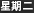
<style>
.page{position:relative;width:34px;height:13px}
.page>*{position:absolute;margin:0}
.t1{font:11.1px "AdobeHeitiStd-Regular";color:#ffffff}
</style>
<div class="page">
<p class="t1" style="left:0px;top:1px;width:33px;height:10px">星期二</p>
</div>
